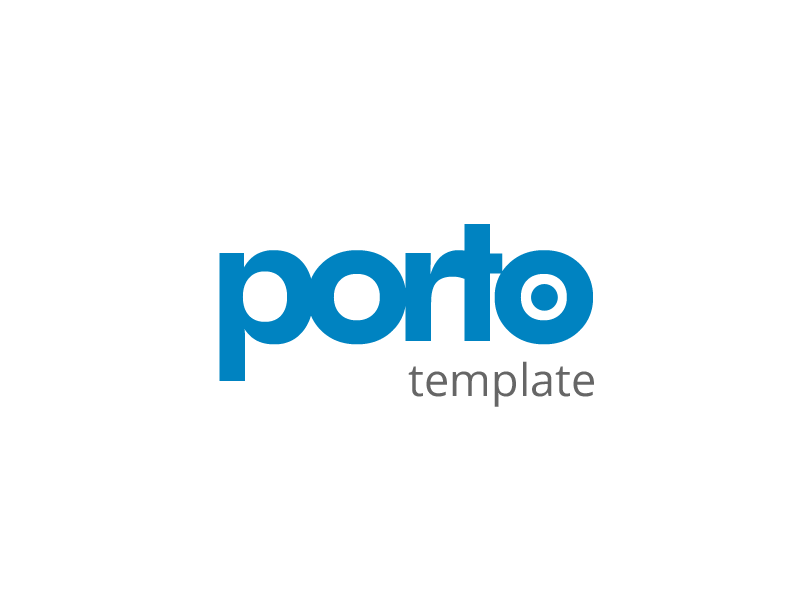
<style>
.page{position:relative;width:800px;height:600px;background:#ffffff}
.page>*{position:absolute;margin:0}
.t1{font:183.3px "FuturaBT-Heavy";letter-spacing:-0.102em;color:#0083c1}
.t2{font:45px "OpenSans";color:#666666}
</style>
<div class="page">
<p class="t1" style="left:219px;top:224px;width:374px;height:157px">porto</p>
<p class="t2" style="left:408px;top:361px;width:186px;height:46px">template</p>
</div>
